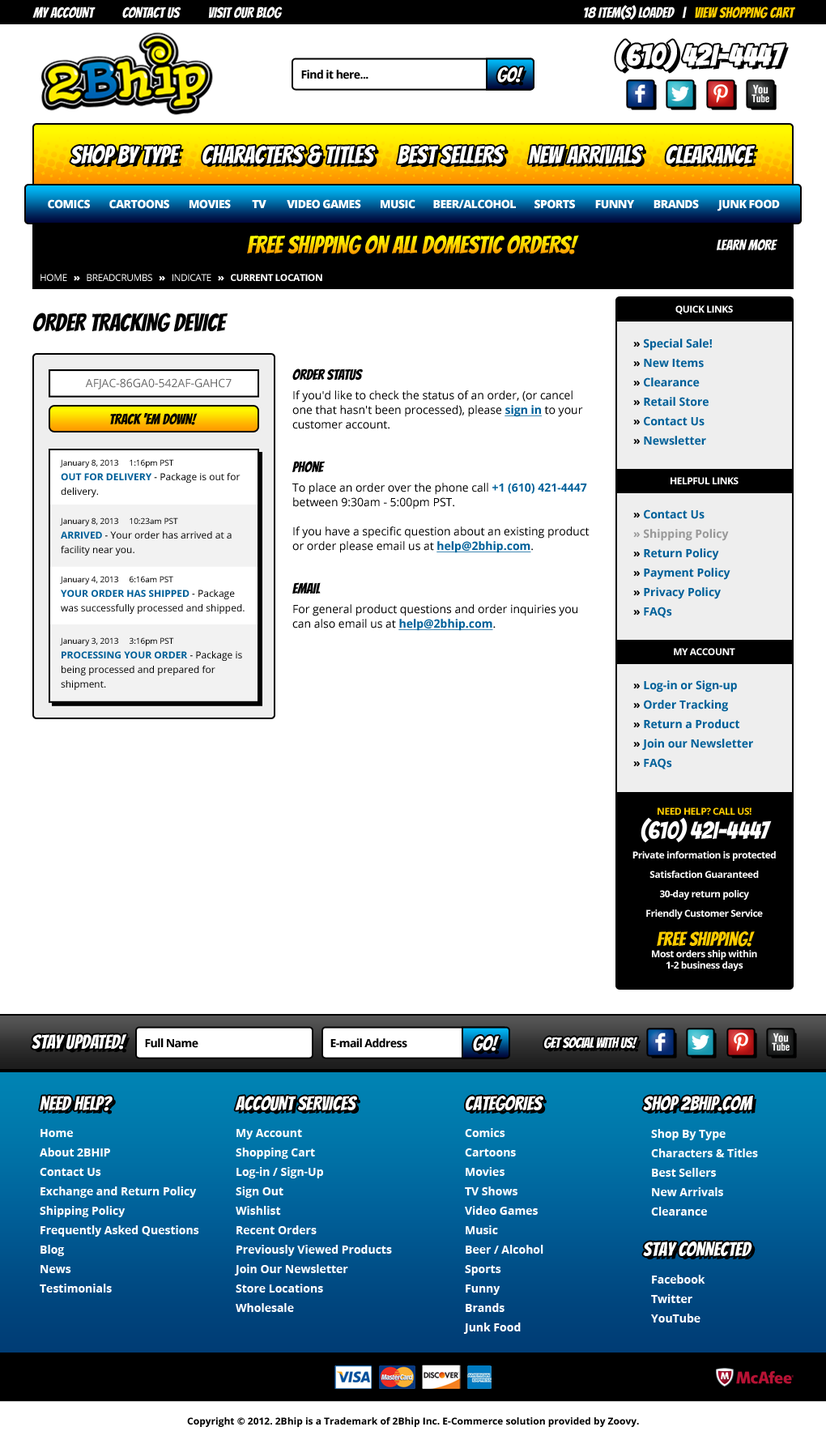
<style>
.page{position:relative;width:826px;height:1444px;background:#ffffff}
.page>*{position:absolute;margin:0}
.t1{font:14.6px "Bangers-Regular";color:#ffffff}
.t2{font:14.6px "Bangers-Regular";color:#ffcc00}
.t3{font:29.2px "Bangers-Regular";color:#ffffff;font-weight:bold}
.t4{font:11.3px "OpenSans-Bold";letter-spacing:-0.04em;color:#000000}
.t5{font:19.4px "Bangers-Regular";color:#ffffff}
.t6{font:24.3px "Bangers-Regular";color:#ffffff}
.t7{font:11.3px "OpenSans-Extrabold";letter-spacing:-0.04em;color:#ffffff}
.t8{font:24.3px "Bangers-Regular"}
.t9{font:9.7px "OpenSans-Bold";letter-spacing:-0.04em;color:#ffffff}
.t10{font:9.7px "OpenSans";letter-spacing:-0.04em;color:#ffffff}
.t11{font:9.7px "OpenSans-Extrabold";letter-spacing:-0.04em;color:#ffffff}
.t12{font:24.3px "Bangers-Regular";color:#000000}
.t13{font:11.3px/19.4px "OpenSans-Bold";color:#006099}
.t14{font:11.3px/19.4px "OpenSans-Bold";color:#000000}
.t15{font:11.3px/14.6px "OpenSans";color:#000000}
.t16{font:14.6px/14.6px "Bangers-Regular";color:#000000}
.t17{font:11.3px/19.4px "OpenSans";color:#000000}
.t18{font:11.3px/14.6px "OpenSans-Bold";color:#006099;text-decoration:underline}
.t19{font:11.3px "OpenSans";color:#666666}
.t20{font:14.6px "Bangers-Regular";color:#000000}
.t21{font:9.7px/14.6px "OpenSans";color:#000000}
.t22{font:8.1px/14.6px "OpenSans";color:#000000}
.t23{font:9.7px/14.6px "OpenSans-Bold";color:#006099}
.t24{font:8.1px/17.8px "OpenSans";color:#000000}
.t25{font:11.3px/19.4px "OpenSans-Bold";color:#999999}
.t26{font:9.7px/19.4px "OpenSans-Bold";letter-spacing:-0.04em;color:#ffffff}
.t27{font:9.7px/19.4px "OpenSans-Bold";letter-spacing:-0.04em;color:#ffcc00;text-transform:uppercase}
.t28{font:24.3px/24.3px "Bangers-Regular";color:#ffffff}
.t29{font:19.4px/29.2px "Bangers-Regular";color:#ffcc00}
.t30{font:9.7px/11.3px "OpenSans-Bold";letter-spacing:-0.04em;color:#ffffff}
.t31{font:14.6px "Bangers-Regular";letter-spacing:-0.025em;color:#ffffff}
.t32{font:11.3px/19.4px "OpenSans-Bold";color:#ffffff}
.t33{font:9.7px "OpenSans-Bold";color:#000000}
</style>
<div class="page">
<p class="t1" style="left:584px;top:5px;width:211px;height:15px">18 ITEM(S) LOADED   |   <span class="t2">VIEW SHOPPING CART</span></p>
<p class="t1" style="left:32px;top:6px;width:251px;height:13px">MY ACCOUNT          CONTACT US          VISIT OUR BLOG</p>
<p class="t3" style="left:615px;top:40px;width:170px;height:30px">(610) 42I-4447</p>
<p class="t4" style="left:301px;top:70px;width:67px;height:9px">Find it here...</p>
<p class="t5" style="left:497px;top:67px;width:27px;height:16px">GO!</p>
<p class="t6" style="left:70px;top:145px;width:111px;height:19px">SHOP BY TYPE</p>
<p class="t6" style="left:202px;top:145px;width:174px;height:19px">CHARACTERS &amp; TITLES</p>
<p class="t6" style="left:398px;top:145px;width:107px;height:19px">BEST SELLERS</p>
<p class="t6" style="left:528px;top:145px;width:115px;height:19px">NEW ARRIVALS</p>
<p class="t6" style="left:666px;top:145px;width:89px;height:19px">CLEARANCE</p>
<p class="t7" style="left:48px;top:199px;width:42px;height:10px">COMICS</p>
<p class="t7" style="left:109px;top:199px;width:60px;height:10px">CARTOONS</p>
<p class="t7" style="left:189px;top:199px;width:42px;height:10px">MOVIES</p>
<p class="t7" style="left:252px;top:200px;width:14px;height:8px">TV</p>
<p class="t7" style="left:287px;top:199px;width:74px;height:10px">VIDEO GAMES</p>
<p class="t7" style="left:381px;top:199px;width:34px;height:10px">MUSIC</p>
<p class="t7" style="left:433px;top:199px;width:83px;height:10px">BEER/ALCOHOL</p>
<p class="t7" style="left:534px;top:199px;width:41px;height:10px">SPORTS</p>
<p class="t7" style="left:595px;top:200px;width:40px;height:9px">FUNNY</p>
<p class="t7" style="left:653px;top:199px;width:46px;height:10px">BRANDS</p>
<p class="t7" style="left:717px;top:199px;width:63px;height:12px">JUNK FOOD</p>
<p class="t8" style="left:247px;top:235px;width:332px;height:19px">FREE SHIPPING ON ALL DOMESTIC ORDERS!</p>
<p class="t1" style="left:717px;top:239px;width:60px;height:11px">LEARN MORE</p>
<p class="t9" style="left:40px;top:274px;width:282px;height:7px"><span class="t10">HOME   </span><span class="t11">»</span><span class="t10">   BREADCRUMBS   </span><span class="t11">»</span><span class="t10">   INDICATE   </span><span class="t11">»   </span>CURRENT LOCATION</p>
<p class="t9" style="left:675px;top:305px;width:58px;height:9px">QUICK LINKS</p>
<p class="t12" style="left:33px;top:313px;width:195px;height:19px">ORDER TRACKING DEVICE</p>
<p class="t13" style="left:633px;top:338px;width:79px;height:107px"><span class="t14">» </span>Special Sale!<br><span class="t14">» </span>New Items<br><span class="t14">» </span>Clearance<br><span class="t14">» </span>Retail Store<br><span class="t14">» </span>Contact Us<br><span class="t14">» </span>Newsletter</p>
<p class="t15" style="left:292px;top:368px;width:297px;height:263px"><span class="t16">Order Status<br></span><span class="t17">If you'd like to check the status of an order, (or cancel<br></span>one that hasn't been processed), please <span class="t18">sign in </span>to your customer account.<br><br><br><span class="t16">Phone<br></span><span class="t17">To place an order over the phone call </span><span class="t13">+1 (610) 421-4447 </span>between 9:30am - 5:00pm PST.<br><br>If you have a specific question about an existing product or order please email us at <span class="t18">help@2bhip.com</span>.<br><br><br><span class="t16">Email<br></span><span class="t17">For general product questions and order inquiries you </span>can also email us at <span class="t18">help@2bhip.com</span>.</p>
<p class="t19" style="left:85px;top:378px;width:147px;height:11px">AFJAC-86GA0-542AF-GAHC7</p>
<p class="t20" style="left:110px;top:412px;width:88px;height:13px">TRACK ‘EM DOWN!</p>
<p class="t21" style="left:60px;top:459px;width:185px;height:231px"><span class="t22">January 8, 2013     1:16pm PST<br></span><span class="t23">OUT FOR DELIVERY </span>- Package is out for delivery.<br><br><span class="t22">January 8, 2013     10:23am PST<br></span><span class="t23">ARRIVED</span> - Your order has arrived at a facility near you.<br><br><span class="t22">January 4, 2013     6:16am PST<br></span><span class="t23">YOUR ORDER HAS SHIPPED </span>- Package was successfully processed and shipped.<br><br><span class="t24">January 3, 2013     3:16pm PST<br></span><span class="t23">PROCESSING YOUR ORDER </span>- Package is being processed and prepared for shipment.</p>
<p class="t9" style="left:670px;top:477px;width:68px;height:7px">HELPFUL LINKS</p>
<p class="t25" style="left:633px;top:509px;width:97px;height:109px"><span class="t14">» </span><span class="t13">Contact Us<br></span>» Shipping Policy<br><span class="t14">» </span><span class="t13">Return Policy<br></span><span class="t14">» </span><span class="t13">Payment Policy<br></span><span class="t14">» </span><span class="t13">Privacy Policy<br></span><span class="t14">» </span><span class="t13">FAQs</span></p>
<p class="t9" style="left:674px;top:648px;width:61px;height:7px">MY ACCOUNT</p>
<p class="t13" style="left:633px;top:680px;width:120px;height:89px"><span class="t14">» </span>Log-in or Sign-up<br><span class="t14">» </span>Order Tracking<br><span class="t14">» </span>Return a Product<br><span class="t14">» </span>Join our Newsletter<br><span class="t14">» </span>FAQs</p>
<p class="t26" style="left:632px;top:807px;width:144px;height:164px;text-align:center"><span class="t27">Need Help? Call us!<br></span><span class="t28">(610) 42I-4447<br></span>Private information is protected<br>Satisfaction Guaranteed<br>30-day return policy<br>Friendly Customer Service<br><span class="t29">Free Shipping!<br></span><span class="t30">Most orders ship within<br>1-2 business days</span></p>
<p class="t5" style="left:32px;top:1034px;width:95px;height:15px">STAY UPDATED!</p>
<p class="t5" style="left:473px;top:1036px;width:27px;height:15px">GO!</p>
<p class="t31" style="left:544px;top:1036px;width:94px;height:13px">GET SOCIAL WITH US!</p>
<p class="t4" style="left:145px;top:1038px;width:53px;height:10px">Full Name</p>
<p class="t4" style="left:330px;top:1038px;width:77px;height:10px">E-mail Address</p>
<p class="t5" style="left:40px;top:1096px;width:73px;height:15px">NEED HELP?</p>
<p class="t5" style="left:235px;top:1096px;width:122px;height:15px">ACCOUNT SERVICES</p>
<p class="t5" style="left:466px;top:1096px;width:77px;height:15px">CATEGORIES</p>
<p class="t5" style="left:643px;top:1096px;width:110px;height:15px">SHOP 2BHIP.COM</p>
<p class="t32" style="left:40px;top:1129px;width:159px;height:163px">Home<br>About 2BHIP<br>Contact Us<br>Exchange and Return Policy<br>Shipping Policy<br>Frequently Asked Questions<br>Blog<br>News<br>Testimonials</p>
<p class="t32" style="left:234px;top:1129px;width:158px;height:183px">My Account<br>Shopping Cart<br>Log-in / Sign-Up<br>Sign Out<br>Wishlist<br>Recent Orders<br>Previously Viewed Products<br>Join Our Newsletter<br>Store Locations<br>Wholesale</p>
<p class="t32" style="left:463px;top:1128px;width:80px;height:206px">Comics<br>Cartoons<br>Movies<br>TV Shows<br>Video Games<br>Music<br>Beer / Alcohol<br>Sports<br>Funny<br>Brands<br>Junk Food</p>
<p class="t32" style="left:651px;top:1129px;width:107px;height:86px">Shop By Type<br>Characters &amp; Titles<br>Best Sellers<br>New Arrivals<br>Clearance</p>
<p class="t5" style="left:643px;top:1241px;width:109px;height:15px">STAY CONNECTED</p>
<p class="t32" style="left:651px;top:1275px;width:54px;height:47px">Facebook<br>Twitter<br>YouTube</p>
<p class="t33" style="left:187px;top:1417px;width:452px;height:10px">Copyright © 2012. 2Bhip is a Trademark of 2Bhip Inc. E-Commerce solution provided by Zoovy.</p>
</div>
